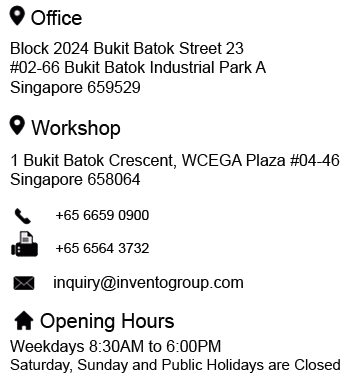
<style>
.page{position:relative;width:350px;height:380px;background:#ffffff}
.page>*{position:absolute;margin:0}
.t1{font:20px "ArialMT";color:#060606}
.t2{font:16px "ArialMT";color:#060606}
.t3{font:14px "ArialMT";color:#060606}
.t4{font:15px "ArialMT";color:#060606}
</style>
<div class="page">
<p class="t1" style="left:31px;top:10px;width:51px;height:15px">Office</p>
<p class="t2" style="left:10px;top:42px;width:256px;height:54px">Block 2024 Bukit Batok Street 23<br>#02-66 Bukit Batok Industrial Park A<br>Singapore 659529</p>
<p class="t1" style="left:31px;top:120px;width:90px;height:19px">Workshop</p>
<p class="t2" style="left:10px;top:154px;width:330px;height:34px">1 Bukit Batok Crescent, WCEGA Plaza #04-46<br>Singapore 658064</p>
<p class="t3" style="left:56px;top:210px;width:93px;height:43px">+65 6659 0900<br><br>+65 6564 3732</p>
<p class="t2" style="left:54px;top:276px;width:189px;height:15px">inquiry@inventogroup.com</p>
<p class="t1" style="left:40px;top:313px;width:134px;height:19px">Opening Hours</p>
<p class="t4" style="left:10px;top:340px;width:330px;height:33px"><span class="t2">Weekdays 8:30AM to 6:00PM<br></span>Saturday, Sunday and Public Holidays are Closed</p>
</div>
